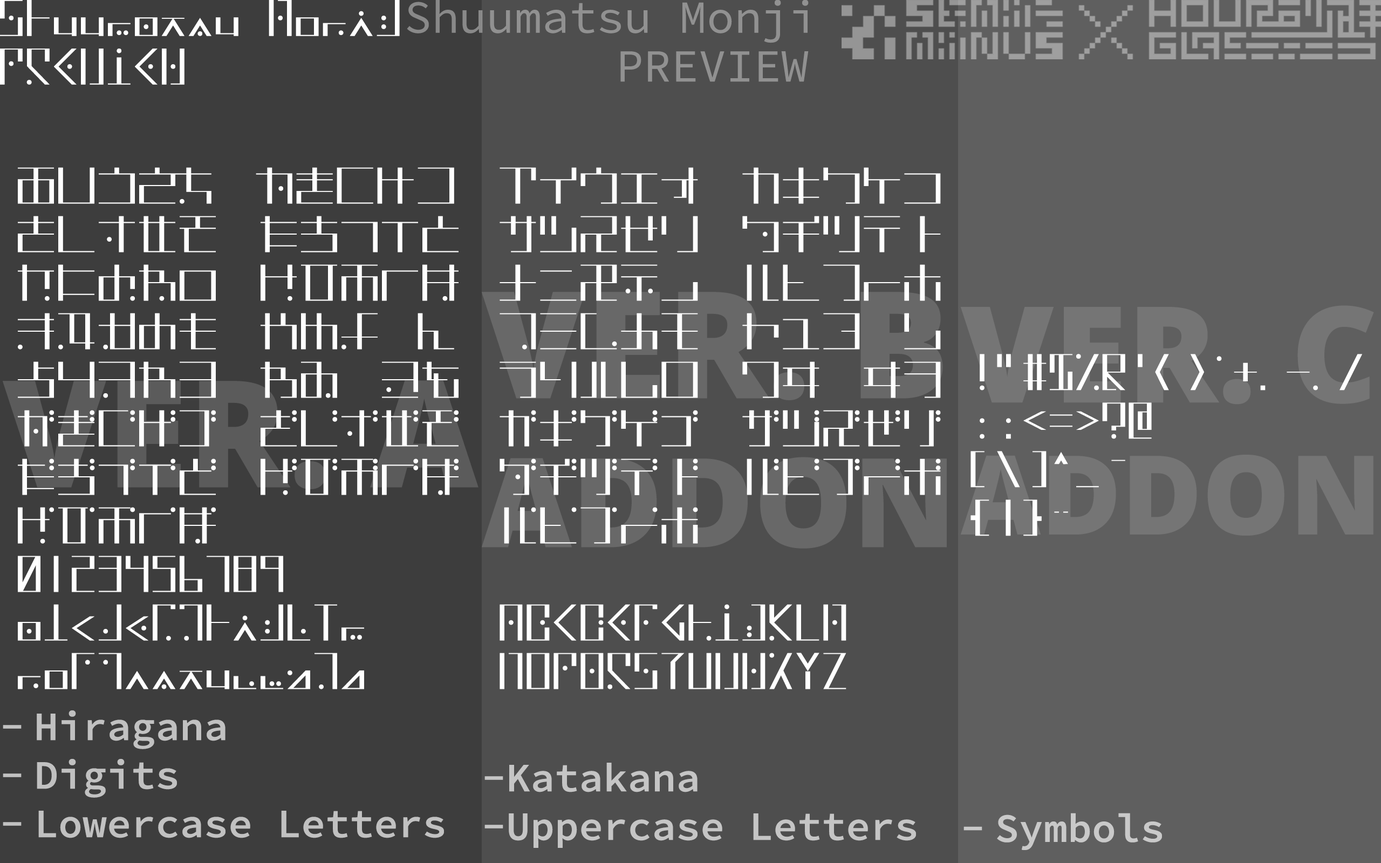
<style>
.page{position:relative;width:1381px;height:863px;background:#5f5f5f}
.page>*{position:absolute;margin:0}
.t1{font:40.5px "ShuumatsuMonji";color:#ffffff}
.t2{font:45.9px "SourceCodePro-Regular";color:#919191}
.t3{font:40.5px "SourceCodePro-Semibold";color:#c1c1c1}
.t4{font:40.5px "SourceCodePro-Semibold";color:#c5c5c5}
.t5{font:40.5px "SourceCodePro-Semibold";color:#c9c9c9}
</style>
<div class="page">
<p class="t1" style="left:0px;top:0px;width:400px;height:85px">Shuumatsu Monij<br>PREVIEW</p>
<p class="t2" style="left:407px;top:0px;width:402px;height:43px">Shuumatsu Monji</p>
<p class="t2" style="left:620px;top:51px;width:189px;height:31px">PREVIEW</p>
<p class="t1" style="left:18px;top:167px;width:441px;height:523px">あいうえお　かきくけこ<br>さしすせそ　たちつてと<br>なにぬねの　はひふへほ<br>まみむめも　やゆよ　ん<br>らりるれろ　わゐ　ゑを<br>がぎぐげご　ざじずぜぞ<br>だぢづでど　ばびぶべぼ<br>ぱぴぷぺぽ<br>0123456789<br>abcdefghijklm<br>nopqrstuvwxyz</p>
<p class="t1" style="left:500px;top:167px;width:441px;height:523px">アイウエオ　カキクケコ<br>サシスセソ　タチツテト<br>ナニヌネノ　ハヒフヘホ<br>マミムメモ　ヤユヨ　ン<br>ラリルレロ　ワヰ　ヰヲ<br>ガギグゲゴ　ザジズゼゾ<br>ダヂヅデド　バビブベボ<br>パピプペポ<br><br>ABCDEFGHIJKLM<br>NOPQRSTUVWXYZ</p>
<p class="t1" style="left:971px;top:354px;width:391px;height:182px">!"#$%&amp;'()*+,-./<br>:;&lt;=&gt;?@<br>[\]^_`<br>{|}~</p>
<p class="t3" style="left:3px;top:711px;width:441px;height:127px">Hiragana<br>Digits<br>Lowercase Letters</p>
<p class="t4" style="left:485px;top:763px;width:431px;height:85px">-Katakana<br>-Uppercase Letters</p>
<p class="t5" style="left:964px;top:813px;width:198px;height:37px">Symbols</p>
</div>
